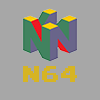
<style>
.page{position:relative;width:100px;height:100px;background:#a7a7a7}
.page>*{position:absolute;margin:0}
.t1{font:18px "ArcadeInterlaced";color:#d6b424;font-weight:bold}
</style>
<div class="page">
<p class="t1" style="left:23px;top:66px;width:54px;height:16px">N64</p>
</div>
